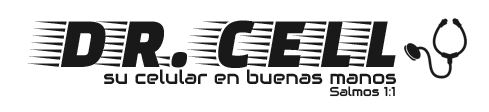
<style>
.page{position:relative;width:489px;height:112px;background:#ffffff}
.page>*{position:absolute;margin:0}
.t1{font:72.8px "FasterOne-Regular";color:#191919}
.t2{font:19.3px "Audiowide-Regular";color:#191919}
.t3{font:12.8px "Audiowide-Regular";color:#191919}
</style>
<div class="page">
<p class="t1" style="left:27px;top:20px;width:369px;height:48px">DR. CELL</p>
<p class="t2" style="left:104px;top:69px;width:292px;height:15px">su celular en buenas manos</p>
<p class="t3" style="left:330px;top:86px;width:65px;height:11px">Salmos 1:1</p>
</div>
